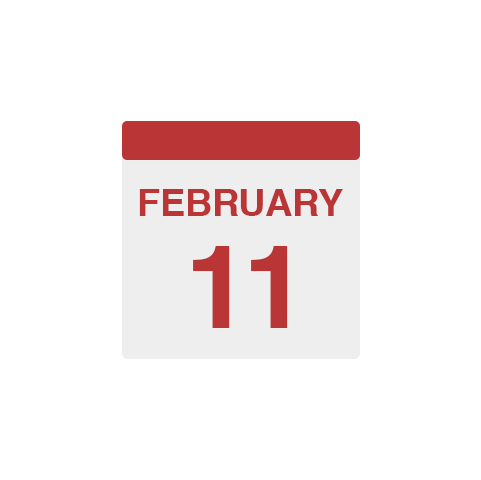
<style>
.page{position:relative;width:481px;height:480px;background:#ffffff}
.page>*{position:absolute;margin:0}
.t1{font:65px "Helvetica-Bold";letter-spacing:-0.01em;color:#ba3636}
.t2{font:200px "Helvetica-Bold";letter-spacing:-0.01em;color:#ba3636}
</style>
<div class="page">
<p class="t1" style="left:139px;top:189px;width:204px;height:27px">FEBRUARY</p>
<p class="t2" style="left:193px;top:246px;width:95px;height:82px">11</p>
</div>
